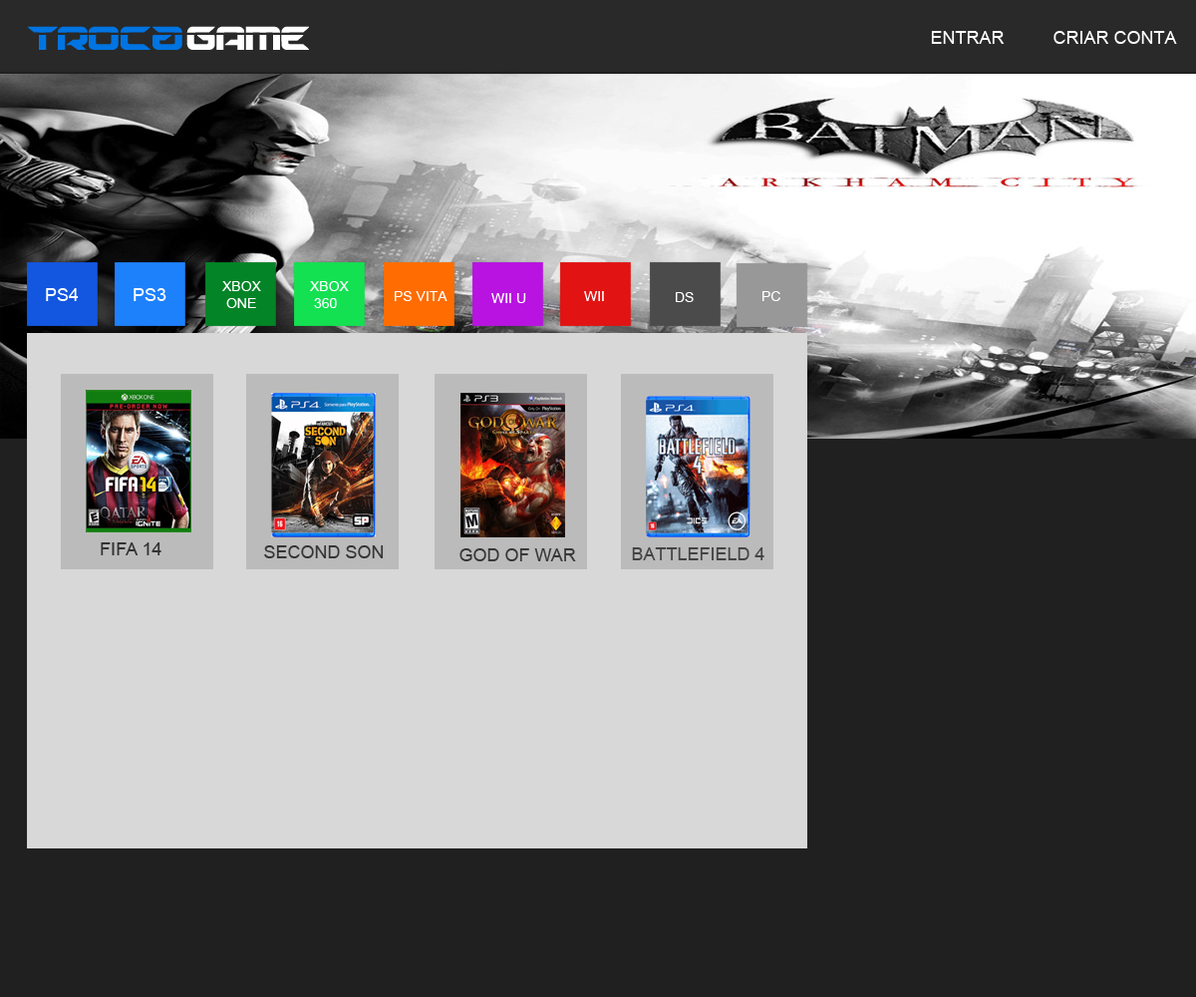
<style>
.page{position:relative;width:1196px;height:997px;background:#212020}
.page>*{position:absolute;margin:0}
.t1{font:47.8px "DriveLaser";color:#0074e1;scale:0.67 1}
.t2{font:47.8px "DriveLaser";color:#ffffff;scale:0.62 1}
.t3{font:17.9px "ArialMT";color:#ffffff}
.t4{font:14px "ArialMT";color:#ffffff}
.t5{font:17.9px "ArialMT";color:#323232}
.t6{font:17.9px "ArialMT";color:#353535}
.t7{font:17.9px "ArialMT";color:#373737}
.t8{font:17.9px "ArialMT";color:#444343}
</style>
<div class="page">
<p class="t1" style="left:28px;top:26px;width:154px;height:24px">troca</p>
<p class="t2" style="left:186px;top:26px;width:123px;height:24px">GAMES</p>
<p class="t3" style="left:931px;top:31px;width:74px;height:13px">ENTRAR</p>
<p class="t3" style="left:1054px;top:31px;width:123px;height:13px">CRIAR CONTA</p>
<p class="t4" style="left:222px;top:281px;width:39px;height:27px">XBOX<br> ONE</p>
<p class="t4" style="left:310px;top:281px;width:39px;height:27px">XBOX<br> 360</p>
<p class="t3" style="left:46px;top:288px;width:33px;height:13px">PS4</p>
<p class="t3" style="left:134px;top:288px;width:32px;height:13px">PS3</p>
<p class="t4" style="left:395px;top:291px;width:53px;height:10px">PS VITA</p>
<p class="t4" style="left:491px;top:293px;width:35px;height:10px">WII U</p>
<p class="t4" style="left:584px;top:291px;width:20px;height:10px">WII</p>
<p class="t4" style="left:676px;top:292px;width:18px;height:10px">DS</p>
<p class="t4" style="left:763px;top:291px;width:18px;height:10px">PC</p>
<p class="t5" style="left:101px;top:542px;width:60px;height:13px">FIFA 14</p>
<p class="t6" style="left:264px;top:545px;width:120px;height:13px">SECOND SON</p>
<p class="t7" style="left:460px;top:548px;width:116px;height:13px">GOD OF WAR</p>
<p class="t8" style="left:632px;top:547px;width:133px;height:13px">BATTLEFIELD 4</p>
</div>
